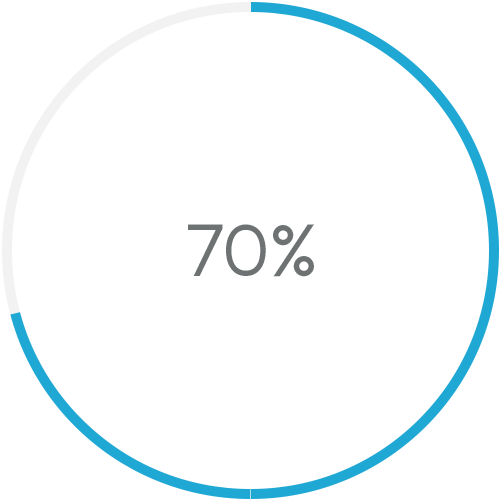
<style>
.page{position:relative;width:500px;height:500px;background:#ffffff}
.page>*{position:absolute;margin:0}
.t1{font:72px "Neou-Bold";color:#6e7273}
</style>
<div class="page">
<p class="t1" style="left:188px;top:224px;width:126px;height:53px">70%</p>
</div>
